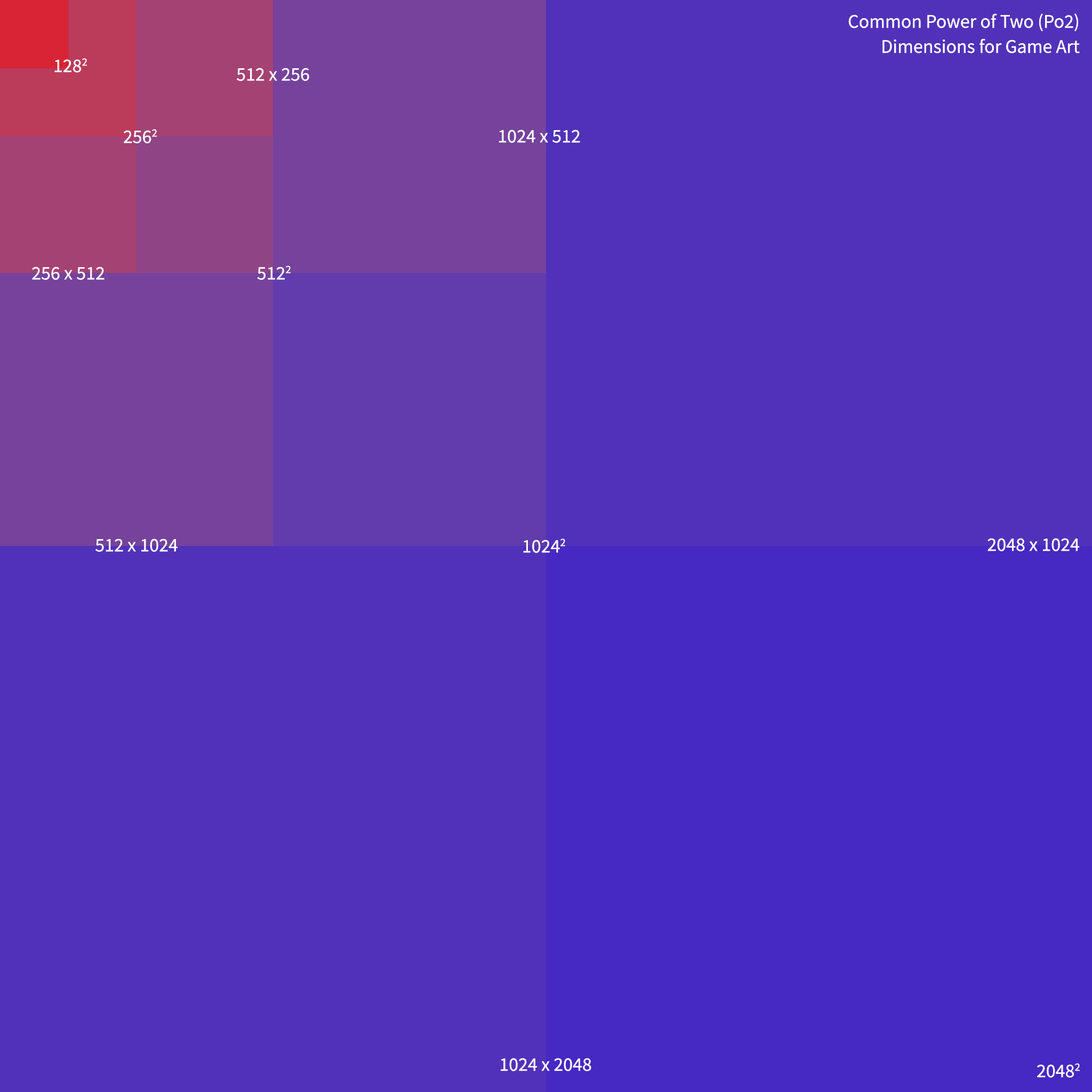
<style>
.page{position:relative;width:1092px;height:1092px;background:#5131b9}
.page>*{position:absolute;margin:0}
.t1{font:19.2px/25.1px "SourceSansPro-Regular";color:#ffffff}
.t2{font:19.2px "SourceSansPro-Regular";color:#ffffff}
</style>
<div class="page">
<p class="t1" style="left:848px;top:13px;width:232px;height:40px;text-align:right">Common Power of Two (Po2) Dimensions for Game Art</p>
<p class="t2" style="left:54px;top:58px;width:33px;height:15px">1282</p>
<p class="t2" style="left:237px;top:68px;width:72px;height:13px">512 x 256</p>
<p class="t2" style="left:124px;top:129px;width:33px;height:14px">2562</p>
<p class="t2" style="left:499px;top:130px;width:81px;height:13px">1024 x 512</p>
<p class="t2" style="left:32px;top:267px;width:73px;height:13px">256 x 512</p>
<p class="t2" style="left:257px;top:266px;width:34px;height:14px">5122</p>
<p class="t2" style="left:95px;top:539px;width:83px;height:13px">512 x 1024</p>
<p class="t2" style="left:523px;top:539px;width:42px;height:14px">10242</p>
<p class="t2" style="left:987px;top:538px;width:92px;height:13px">2048 x 1024</p>
<p class="t2" style="left:501px;top:1058px;width:90px;height:13px">1024 x 2048</p>
<p class="t2" style="left:1037px;top:1063px;width:43px;height:15px">20482</p>
</div>
